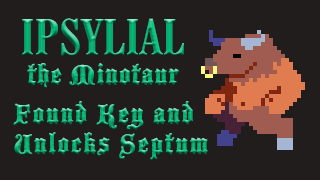
<style>
.page{position:relative;width:320px;height:180px;background:#211d1d}
.page>*{position:absolute;margin:0}
.t1{font:50px "CenturySchoolbookW03-BdCnd";letter-spacing:0.025em}
.t2{font:30.5px "1BlackmoorLETPlain10";letter-spacing:0.025em}
.t3{font:30.5px/30px "1BlackmoorLETPlain10";letter-spacing:0.05em}
</style>
<div class="page">
<p class="t1" style="left:22px;top:18px;width:162px;height:38px">IPSYLIAL</p>
<p class="t2" style="left:27px;top:63px;width:152px;height:25px">the Minotaur</p>
<p class="t3" style="left:13px;top:101px;width:195px;height:59px">Found Key and<br>Unlocks Septum</p>
</div>
